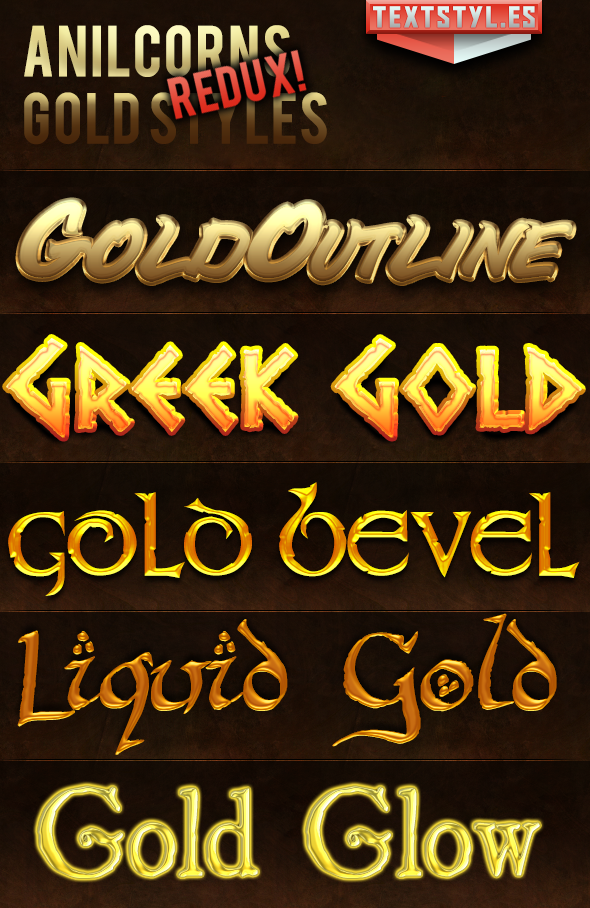
<style>
.page{position:relative;width:590px;height:908px}
.page>*{position:absolute;margin:0}
.t1{font:95px "BottleDepot";letter-spacing:-0.005em}
.t2{font:110px "Dalek";letter-spacing:-0.005em}
.t3{font:79px "Stonecross";letter-spacing:-0.005em}
.t4{font:120px "Hobbitonbrush";letter-spacing:-0.005em;font-weight:bold}
.t5{font:120px "StNicholas";letter-spacing:-0.005em;font-weight:bold}
</style>
<div class="page">
<p class="t1" style="left:19px;top:201px;width:554px;height:81px">GoldOutline</p>
<p class="t2" style="left:6px;top:338px;width:576px;height:100px">Greek Gold</p>
<p class="t3" style="left:8px;top:482px;width:572px;height:114px">GOLD BEVEL</p>
<p class="t4" style="left:17px;top:613px;width:540px;height:142px">Liquid Gold</p>
<p class="t5" style="left:37px;top:786px;width:503px;height:92px">Gold Glow</p>
</div>
